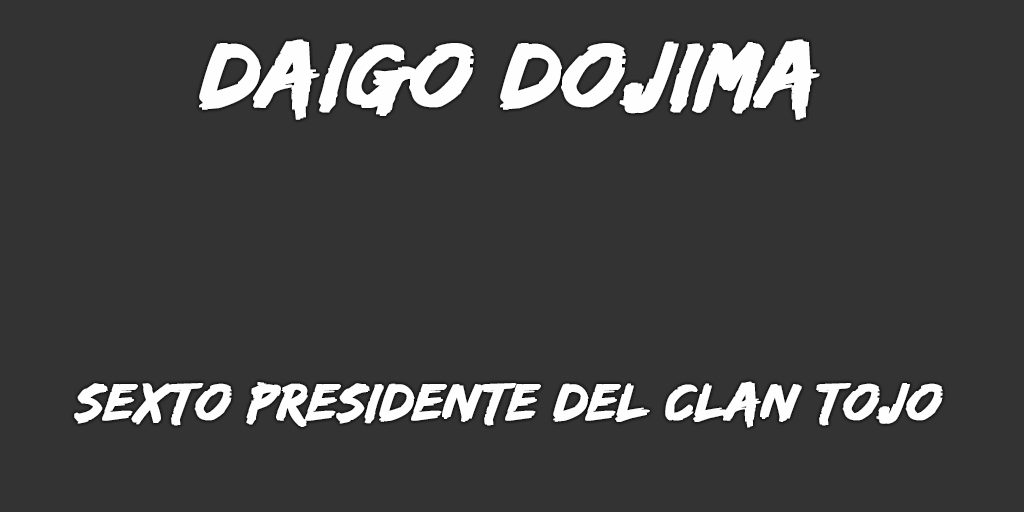
<style>
.page{position:relative;width:1024px;height:512px;background:#333333}
.page>*{position:absolute;margin:0}
.t1{font:95px "EdoSZ";color:#fefefe;font-weight:bold;font-style:italic;scale:1.04 1}
.t2{font:54px "EdoSZ";color:#fefefe;font-weight:bold;font-style:italic;scale:1.04 1}
</style>
<div class="page">
<p class="t1" style="left:199px;top:39px;width:621px;height:81px">daigo dojima</p>
<p class="t2" style="left:74px;top:381px;width:869px;height:47px">sexto presidente DEL CLAN TOJO</p>
</div>
